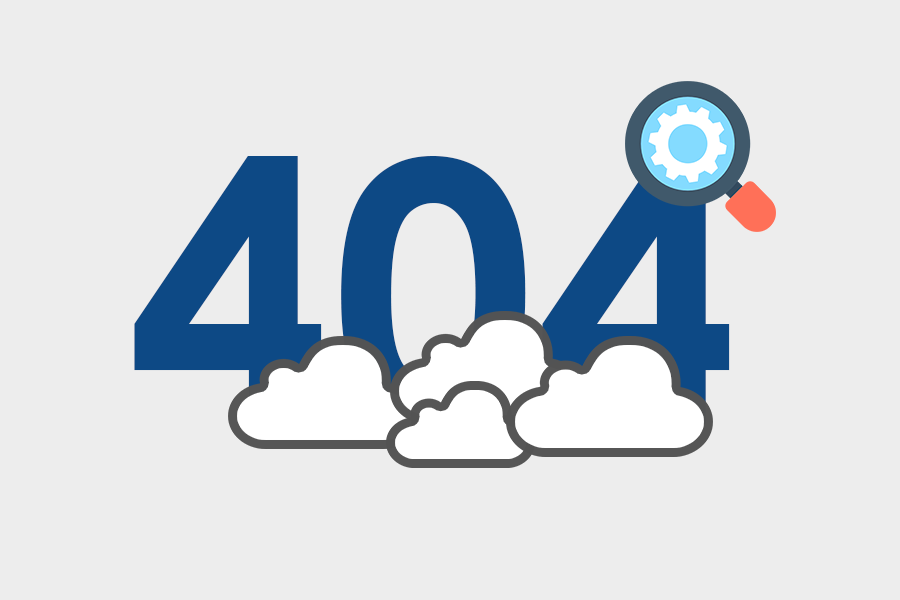
<style>
.page{position:relative;width:900px;height:600px;background:#ededed}
.page>*{position:absolute;margin:0}
.t1{font:364.6px "CenturyGothic-Bold";color:#0d4985}
</style>
<div class="page">
<p class="t1" style="left:134px;top:156px;width:596px;height:274px">404</p>
</div>
